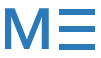
<style>
.page{position:relative;width:101px;height:58px;background:#ffffff}
.page>*{position:absolute;margin:0}
.t1{font:58px "YuGothicUI-Semibold";color:#2b79b9;text-transform:uppercase}
</style>
<div class="page">
<p class="t1" style="left:5px;top:8px;width:44px;height:41px">M</p>
</div>
